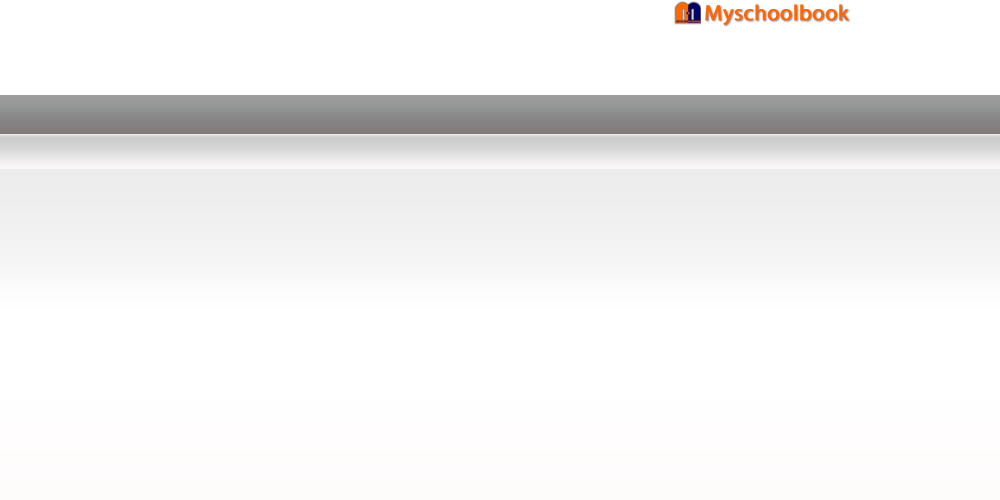
<style>
.page{position:relative;width:1000px;height:500px;background:#ffffff}
.page>*{position:absolute;margin:0}
.t1{font:22px "MyriadPro-Regular";letter-spacing:0.01em;color:#ff6600;font-weight:bold}
</style>
<div class="page">
<p class="t1" style="left:705px;top:4px;width:144px;height:21px">Myschoolbook</p>
</div>
